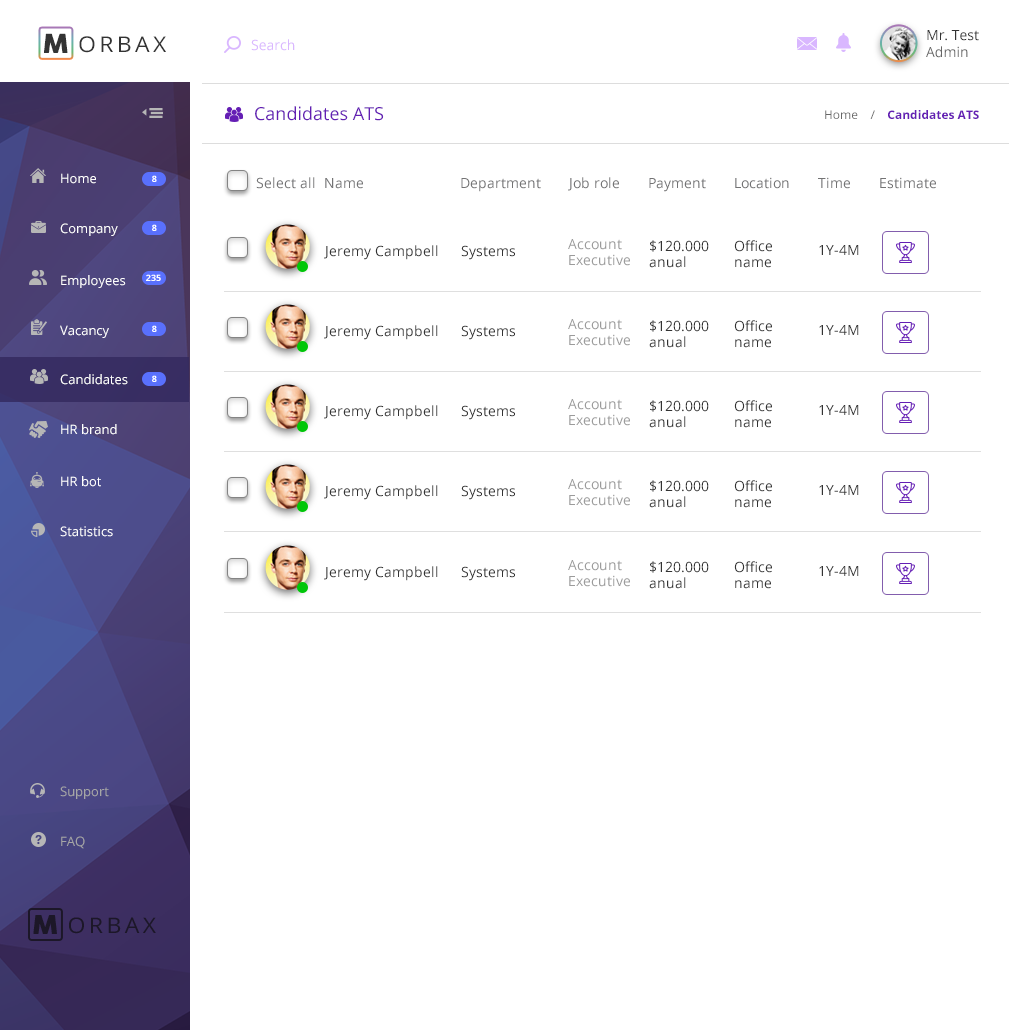
<style>
.page{position:relative;width:1024px;height:1030px;background:#ffffff}
.page>*{position:absolute;margin:0}
.t1{font:14px "OpenSans";color:#333333}
.t2{font:14px "OpenSans";color:#666666}
.t3{font:26.1px "COCOGOOSE";letter-spacing:0.15em;color:#333333;text-transform:uppercase;scale:1.05 1}
.t4{font:21.8px "OpenSans";letter-spacing:0.15em;color:#333333;text-transform:uppercase;scale:1.05 1}
.t5{font:14px "OpenSans";color:#d9b7ff}
.t6{font:18px "OpenSans";color:#641eb4}
.t7{font:12px "OpenSans-Bold";color:#641eb4}
.t8{font:12px "OpenSans";color:#666666}
.t9{font:13px "OpenSans";color:#ffffff}
.t10{font:8.8px "OpenSans-Bold";color:#ffffff}
.t11{font:14px "OpenSans";color:#737374}
.t12{font:14px/16px "OpenSans";color:#9b9b9b}
.t13{font:14px/16px "OpenSans";color:#333333}
.t14{font:13px "OpenSans";color:#a6a6a6}
.t15{font:25.8px "COCOGOOSE";letter-spacing:0.15em;color:#1c1728;text-transform:uppercase;scale:1.07 1}
.t16{font:21.5px "OpenSans";letter-spacing:0.15em;color:#1c1728;text-transform:uppercase;scale:1.07 1}
</style>
<div class="page">
<p class="t1" style="left:926px;top:30px;width:53px;height:28px">Mr. Test<br><span class="t2">Admin</span></p>
<p class="t3" style="left:44px;top:33px;width:24px;height:20px">M</p>
<p class="t4" style="left:79px;top:36px;width:87px;height:17px">orbax</p>
<p class="t5" style="left:251px;top:39px;width:44px;height:12px">Search</p>
<p class="t6" style="left:255px;top:106px;width:129px;height:15px">Candidates ATS</p>
<p class="t7" style="left:825px;top:110px;width:154px;height:9px"><span class="t8">Home    /    </span>Candidates ATS</p>
<p class="t9" style="left:61px;top:173px;width:35px;height:11px">Home</p>
<p class="t10" style="left:152px;top:175px;width:5px;height:7px">8</p>
<p class="t11" style="left:256px;top:177px;width:680px;height:15px">Select all  Name                        Department       Job role       Payment       Location       Time       Estimate</p>
<p class="t9" style="left:60px;top:223px;width:58px;height:13px">Company</p>
<p class="t10" style="left:152px;top:224px;width:5px;height:7px">8</p>
<p class="t1" style="left:324px;top:245px;width:114px;height:15px">Jeremy Campbell</p>
<p class="t1" style="left:461px;top:245px;width:54px;height:15px">Systems</p>
<p class="t12" style="left:568px;top:239px;width:62px;height:27px">Account <br>Executive</p>
<p class="t13" style="left:649px;top:240px;width:60px;height:28px">$120.000<br>anual</p>
<p class="t13" style="left:734px;top:240px;width:38px;height:28px">Office<br>name</p>
<p class="t1" style="left:819px;top:245px;width:40px;height:10px">1Y-4M</p>
<p class="t9" style="left:61px;top:275px;width:65px;height:13px">Employees</p>
<p class="t10" style="left:146px;top:274px;width:15px;height:7px">235</p>
<p class="t9" style="left:60px;top:325px;width:49px;height:13px">Vacancy</p>
<p class="t10" style="left:152px;top:325px;width:5px;height:7px">8</p>
<p class="t1" style="left:324px;top:325px;width:114px;height:15px">Jeremy Campbell</p>
<p class="t1" style="left:461px;top:325px;width:54px;height:15px">Systems</p>
<p class="t12" style="left:568px;top:319px;width:62px;height:27px">Account <br>Executive</p>
<p class="t13" style="left:649px;top:320px;width:60px;height:28px">$120.000<br>anual</p>
<p class="t13" style="left:734px;top:320px;width:38px;height:28px">Office<br>name</p>
<p class="t1" style="left:819px;top:325px;width:40px;height:10px">1Y-4M</p>
<p class="t9" style="left:60px;top:374px;width:68px;height:11px">Candidates</p>
<p class="t10" style="left:152px;top:375px;width:5px;height:7px">8</p>
<p class="t12" style="left:568px;top:399px;width:62px;height:27px">Account <br>Executive</p>
<p class="t13" style="left:649px;top:400px;width:60px;height:28px">$120.000<br>anual</p>
<p class="t13" style="left:734px;top:400px;width:38px;height:28px">Office<br>name</p>
<p class="t1" style="left:324px;top:405px;width:114px;height:15px">Jeremy Campbell</p>
<p class="t1" style="left:461px;top:405px;width:54px;height:15px">Systems</p>
<p class="t1" style="left:819px;top:405px;width:40px;height:10px">1Y-4M</p>
<p class="t9" style="left:61px;top:424px;width:56px;height:11px">HR brand</p>
<p class="t9" style="left:61px;top:476px;width:40px;height:11px">HR bot</p>
<p class="t1" style="left:324px;top:485px;width:114px;height:15px">Jeremy Campbell</p>
<p class="t1" style="left:461px;top:485px;width:54px;height:15px">Systems</p>
<p class="t12" style="left:568px;top:479px;width:62px;height:27px">Account <br>Executive</p>
<p class="t13" style="left:649px;top:480px;width:60px;height:28px">$120.000<br>anual</p>
<p class="t13" style="left:734px;top:480px;width:38px;height:28px">Office<br>name</p>
<p class="t1" style="left:819px;top:485px;width:40px;height:10px">1Y-4M</p>
<p class="t9" style="left:60px;top:526px;width:53px;height:11px">Statistics</p>
<p class="t1" style="left:324px;top:566px;width:114px;height:15px">Jeremy Campbell</p>
<p class="t1" style="left:461px;top:566px;width:54px;height:15px">Systems</p>
<p class="t12" style="left:568px;top:560px;width:62px;height:27px">Account <br>Executive</p>
<p class="t13" style="left:649px;top:561px;width:60px;height:28px">$120.000<br>anual</p>
<p class="t13" style="left:734px;top:561px;width:38px;height:28px">Office<br>name</p>
<p class="t1" style="left:819px;top:566px;width:40px;height:10px">1Y-4M</p>
<p class="t14" style="left:60px;top:786px;width:49px;height:13px">Support</p>
<p class="t14" style="left:61px;top:836px;width:24px;height:13px">FAQ</p>
<p class="t15" style="left:33px;top:915px;width:24px;height:19px">M</p>
<p class="t16" style="left:69px;top:917px;width:87px;height:17px">orbax</p>
</div>
